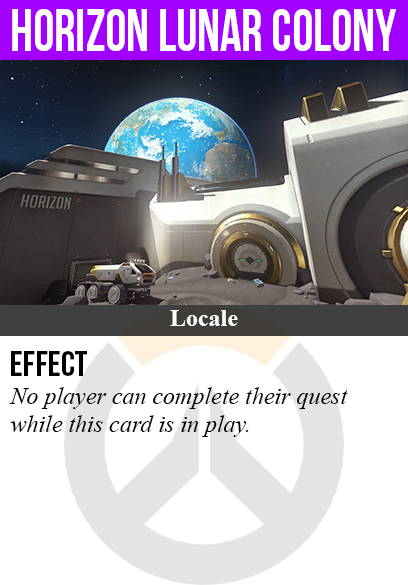
<style>
.page{position:relative;width:408px;height:585px;background:#ffffff}
.page>*{position:absolute;margin:0}
.t1{font:60px "BebasNeue";color:#ffffff;scale:0.89 1}
.t2{font:24px "TimesNewRomanPS-BoldMT";color:#ffffff}
.t3{font:36px "BebasNeue";color:#000000}
.t4{font:24px "TimesNewRomanPS-ItalicMT";color:#000000}
</style>
<div class="page">
<p class="t1" style="left:12px;top:9px;width:385px;height:42px">horizon lunar colony</p>
<p class="t2" style="left:170px;top:310px;width:68px;height:16px">Locale</p>
<p class="t3" style="left:11px;top:351px;width:76px;height:25px">Effect</p>
<p class="t4" style="left:9px;top:387px;width:339px;height:50px">No player can complete their quest<br>while this card is in play.</p>
</div>
